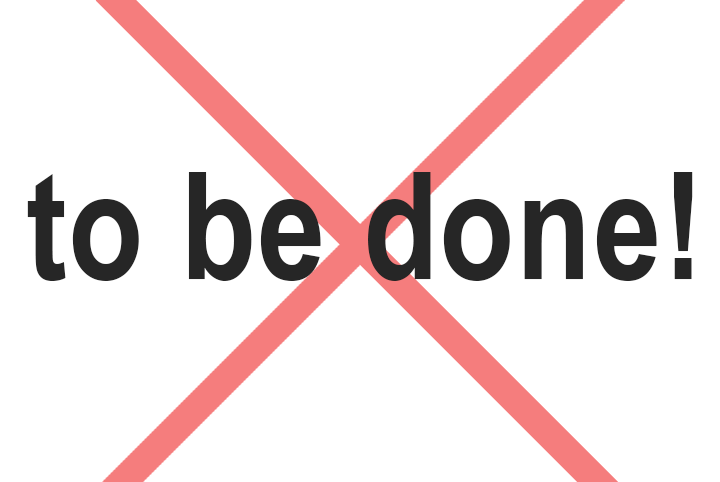
<style>
.page{position:relative;width:720px;height:482px;background:#ffffff}
.page>*{position:absolute;margin:0}
.t1{font:150px "ArialNarrow-Bold";letter-spacing:0.01em;color:#262626}
</style>
<div class="page">
<p class="t1" style="left:27px;top:172px;width:666px;height:109px">to be done!</p>
</div>
